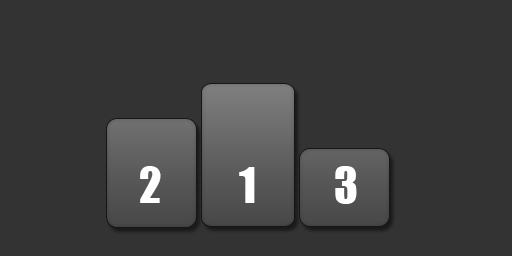
<style>
.page{position:relative;width:512px;height:256px;background:#333333}
.page>*{position:absolute;margin:0}
.t1{font:45px "Impact";color:#ffffff}
</style>
<div class="page">
<p class="t1" style="left:140px;top:166px;width:21px;height:37px">2</p>
<p class="t1" style="left:239px;top:167px;width:16px;height:36px">1</p>
<p class="t1" style="left:335px;top:166px;width:22px;height:38px">3</p>
</div>
